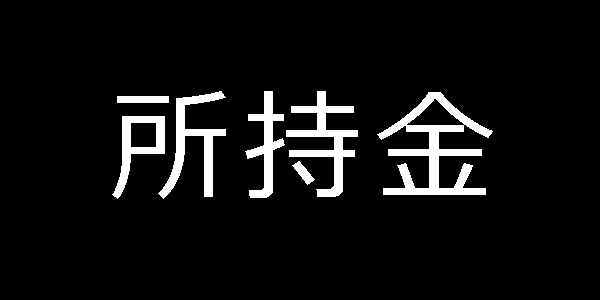
<style>
.page{position:relative;width:600px;height:300px;background:#000000}
.page>*{position:absolute;margin:0}
.t1{font:120px "Meiryo";letter-spacing:0.1em;color:#ffffff}
.t2{font:352px "MonotypeCorsiva";letter-spacing:0.1em;color:#e21d1d}
</style>
<div class="page">
<p class="t1" style="left:112px;top:91px;width:381px;height:108px"><span class="t2"><br></span>所持金</p>
</div>
